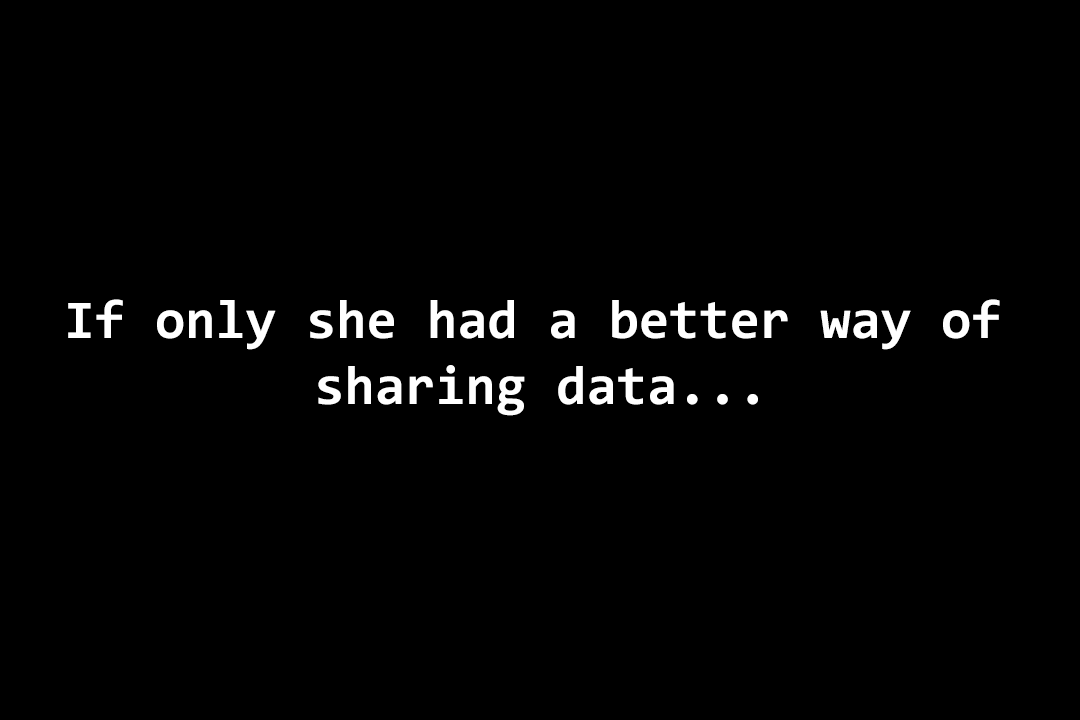
<style>
.page{position:relative;width:1080px;height:720px;background:#000000}
.page>*{position:absolute;margin:0}
.t1{font:55px "Consolas-Bold";color:#ffffff}
</style>
<div class="page">
<p class="t1" style="left:68px;top:299px;width:932px;height:117px;text-align:center">If only she had a better way of <br>sharing data...</p>
</div>
